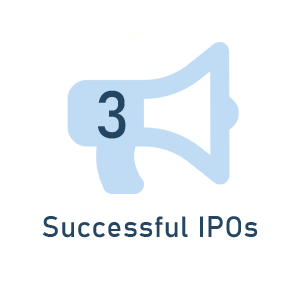
<style>
.page{position:relative;width:300px;height:300px;background:#ffffff}
.page>*{position:absolute;margin:0}
.t1{font:66px "Bahnschrift";letter-spacing:0.02em;color:#244662}
.t2{font:29px "Bahnschrift";letter-spacing:0.02em;color:#244662}
</style>
<div class="page">
<p class="t1" style="left:98px;top:90px;width:28px;height:49px">3</p>
<p class="t2" style="left:42px;top:216px;width:216px;height:22px">Successful IPOs</p>
</div>
